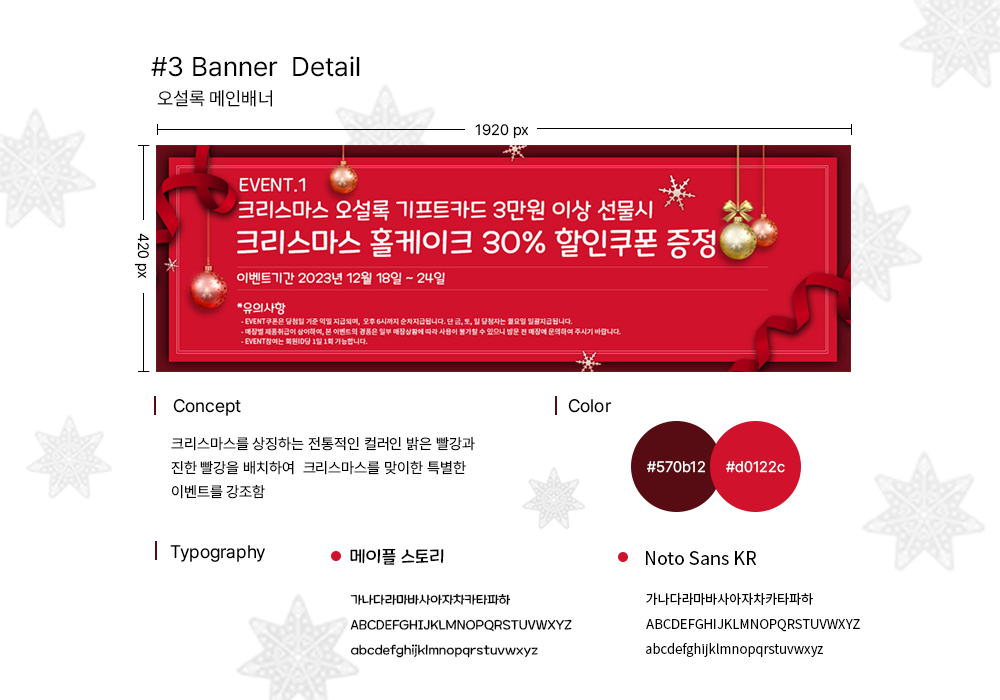
<style>
.page{position:relative;width:1000px;height:700px;background:#ffffff}
.page>*{position:absolute;margin:0}
.t1{font:27px "Pretendard-Regular";color:#000000}
.t2{font:18.7px "Pretendard-Regular";color:#000000}
.t3{font:15px "Pretendard-Regular";color:#000000}
.t4{font:18px "Pretendard-Regular";color:#000000}
.t5{font:15px/24px "Pretendard-Regular";color:#000000}
.t6{font:15px "Pretendard-Regular";color:#ffffff}
.t7{font:18px "MaplestoryLight";color:#000000}
.t8{font:18px "NotoSansKR-Regular";color:#000000}
.t9{font:13px "MaplestoryLight";color:#000000}
.t10{font:13px "NotoSansKR-Regular";color:#000000}
</style>
<div class="page">
<p class="t1" style="left:151px;top:56px;width:209px;height:21px">#3 Banner  Detail</p>
<p class="t2" style="left:157px;top:90px;width:115px;height:17px">오설록 메인배너</p>
<p class="t3" style="left:475px;top:124px;width:54px;height:15px">1920 px</p>
<p class="t3" style="left:134px;top:233px;width:15px;height:45px;rotate:90deg">420 px</p>
<p class="t4" style="left:173px;top:399px;width:68px;height:17px">Concept</p>
<p class="t4" style="left:568px;top:399px;width:44px;height:14px">Color</p>
<p class="t5" style="left:171px;top:437px;width:304px;height:62px">크리스마스를 상징하는 전통적인 컬러인 밝은 빨강과<br>진한 빨강을 배치하여  크리스마스를 맞이한 특별한<br>이벤트를 강조함</p>
<p class="t6" style="left:647px;top:461px;width:58px;height:12px">#570b12</p>
<p class="t6" style="left:726px;top:461px;width:59px;height:12px">#d0122c</p>
<p class="t4" style="left:170px;top:545px;width:96px;height:17px">Typography</p>
<p class="t7" style="left:350px;top:548px;width:94px;height:17px">메이플 스토리</p>
<p class="t8" style="left:646px;top:551px;width:111px;height:14px">Noto Sans KR</p>
<p class="t9" style="left:350px;top:593px;width:161px;height:12px">가나다라마바사아자차카타파하</p>
<p class="t10" style="left:646px;top:592px;width:167px;height:14px">가나다라마바사아자차카타파하</p>
<p class="t9" style="left:350px;top:619px;width:222px;height:13px">ABCDEFGHIJKLMNOPQRSTUVWXYZ</p>
<p class="t10" style="left:646px;top:619px;width:214px;height:13px">ABCDEFGHIJKLMNOPQRSTUVWXYZ</p>
<p class="t9" style="left:350px;top:644px;width:188px;height:14px">abcdefghijklmnopqrstuvwxyz</p>
<p class="t10" style="left:646px;top:642px;width:177px;height:15px">abcdefghijklmnopqrstuvwxyz</p>
</div>
